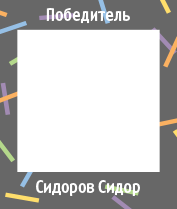
<style>
.page{position:relative;width:177px;height:209px;background:#ffffff}
.page>*{position:absolute;margin:0}
.t1{font:19px "SvyaznoyRFCondensed-Bold";color:#ffffff}
</style>
<div class="page">
<p class="t1" style="left:46px;top:8px;width:84px;height:16px">Победитель</p>
<p class="t1" style="left:36px;top:180px;width:104px;height:16px">Сидоров Сидор</p>
</div>
